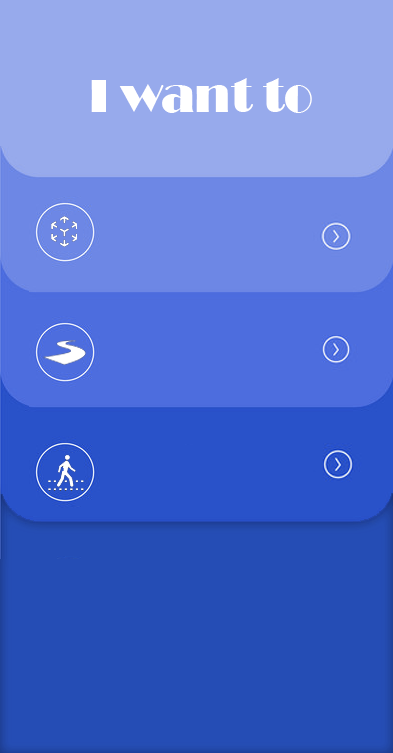
<style>
.page{position:relative;width:393px;height:753px;background:#254db5}
.page>*{position:absolute;margin:0}
.t1{font:48px "Broadway";color:#ffffff}
</style>
<div class="page">
<p class="t1" style="left:91px;top:78px;width:221px;height:35px">I want to</p>
</div>
